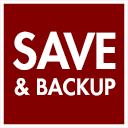
<style>
.page{position:relative;width:128px;height:128px;background:#820000}
.page>*{position:absolute;margin:0}
.t1{font:22px "FuturaLT-Heavy";color:#ffffff}
.t2{font:48px "FuturaLT-Heavy";color:#ffffff}
</style>
<div class="page">
<p class="t1" style="left:13px;top:31px;width:103px;height:65px;text-align:center"><span class="t2">SAVE<br></span>&amp; BACKUP</p>
</div>
